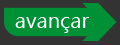
<style>
.page{position:relative;width:120px;height:45px;background:#009036}
.page>*{position:absolute;margin:0}
.t1{font:22px "Ebrima";color:#ffffff}
</style>
<div class="page">
<p class="t1" style="left:15px;top:17px;width:75px;height:16px">avançar</p>
</div>
